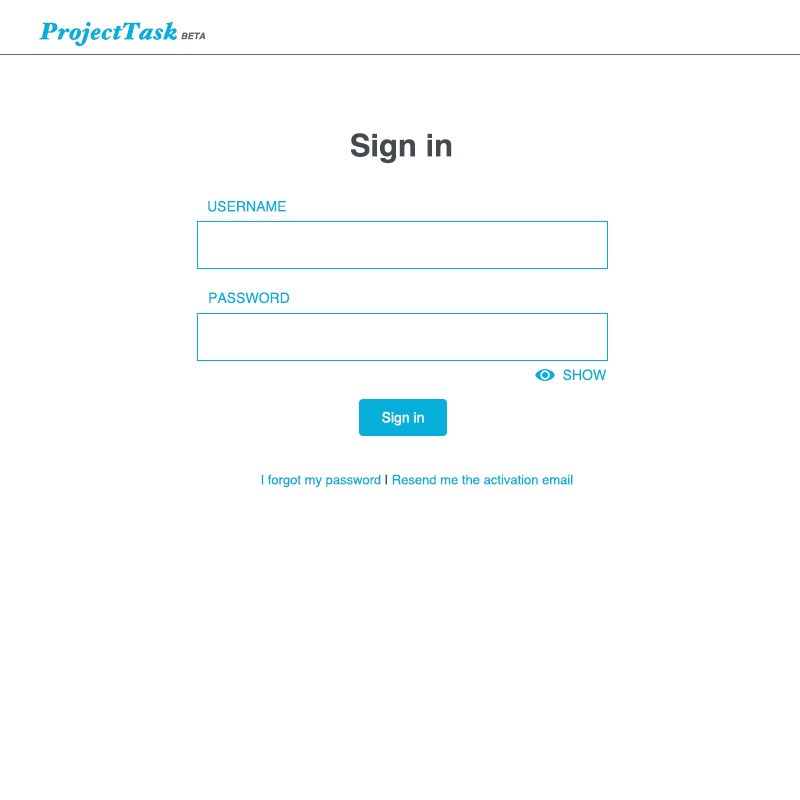
<style>
.page{position:relative;width:800px;height:800px;background:#ffffff}
.page>*{position:absolute;margin:0}
.t1{font:24px "HoeflerText-BlackItalic";color:#07b0da}
.t2{font:9px "Helvetica-BoldOblique";color:#666666}
.t3{font:31px "Helvetica-Bold";color:#444a4e}
.t4{font:14px "Helvetica";color:#07b0da}
.t5{font:14px "Helvetica";color:#ffffff}
.t6{font:13px "Helvetica";color:#07b0da}
.t7{font:13px "Helvetica";color:#444a4e}
</style>
<div class="page">
<p class="t1" style="left:39px;top:21px;width:138px;height:25px">ProjectTask</p>
<p class="t2" style="left:181px;top:32px;width:25px;height:8px">BETA</p>
<p class="t3" style="left:351px;top:133px;width:101px;height:31px">Sign in</p>
<p class="t4" style="left:208px;top:200px;width:78px;height:12px">USERNAME</p>
<p class="t4" style="left:209px;top:292px;width:81px;height:12px">PASSWORD</p>
<p class="t4" style="left:563px;top:369px;width:44px;height:12px">SHOW</p>
<p class="t5" style="left:382px;top:411px;width:42px;height:15px">Sign in</p>
<p class="t6" style="left:261px;top:474px;width:312px;height:14px">I forgot my password<span class="t7"> |</span> Resend me the activation email</p>
</div>
